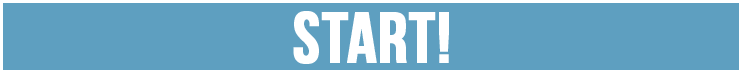
<style>
.page{position:relative;width:742px;height:73px;background:#5e9fc0}
.page>*{position:absolute;margin:0}
.t1{font:72px "BebasNeue";color:#ffffff;font-weight:bold}
</style>
<div class="page">
<p class="t1" style="left:293px;top:11px;width:156px;height:53px">Start!</p>
</div>
